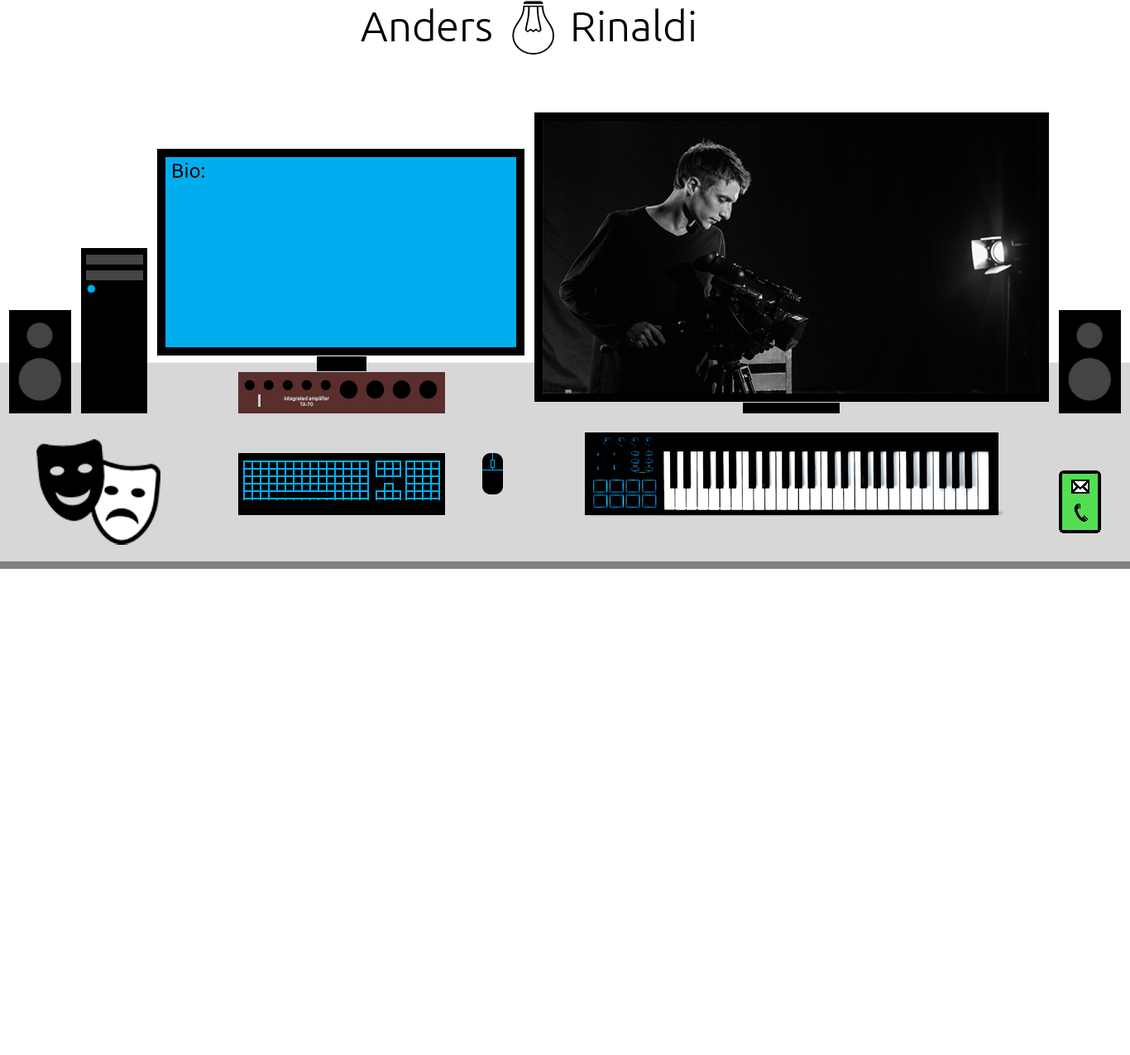
<style>
.page{position:relative;width:1130px;height:1055px;background:#ffffff}
.page>*{position:absolute;margin:0}
.t1{font:42.2px "Ubuntu-Light";color:#000000}
.t2{font:19.9px "Ubuntu";color:#000000}
</style>
<div class="page">
<p class="t1" style="left:361px;top:8px;width:334px;height:33px">Anders        Rinaldi</p>
<p class="t2" style="left:173px;top:163px;width:32px;height:15px">Bio:</p>
</div>
